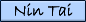
<style>
.page{position:relative;width:86px;height:22px;background:#b3d3ff}
.page>*{position:absolute;margin:0}
.t1{font:17.8px "BradleyHandITC";color:#000000}
</style>
<div class="page">
<p class="t1" style="left:15px;top:3px;width:58px;height:13px">Nin Tai</p>
<p class="t1" style="left:15px;top:3px;width:58px;height:13px">Nin Tai</p>
<p class="t1" style="left:15px;top:3px;width:58px;height:13px">Nin Tai</p>
</div>
